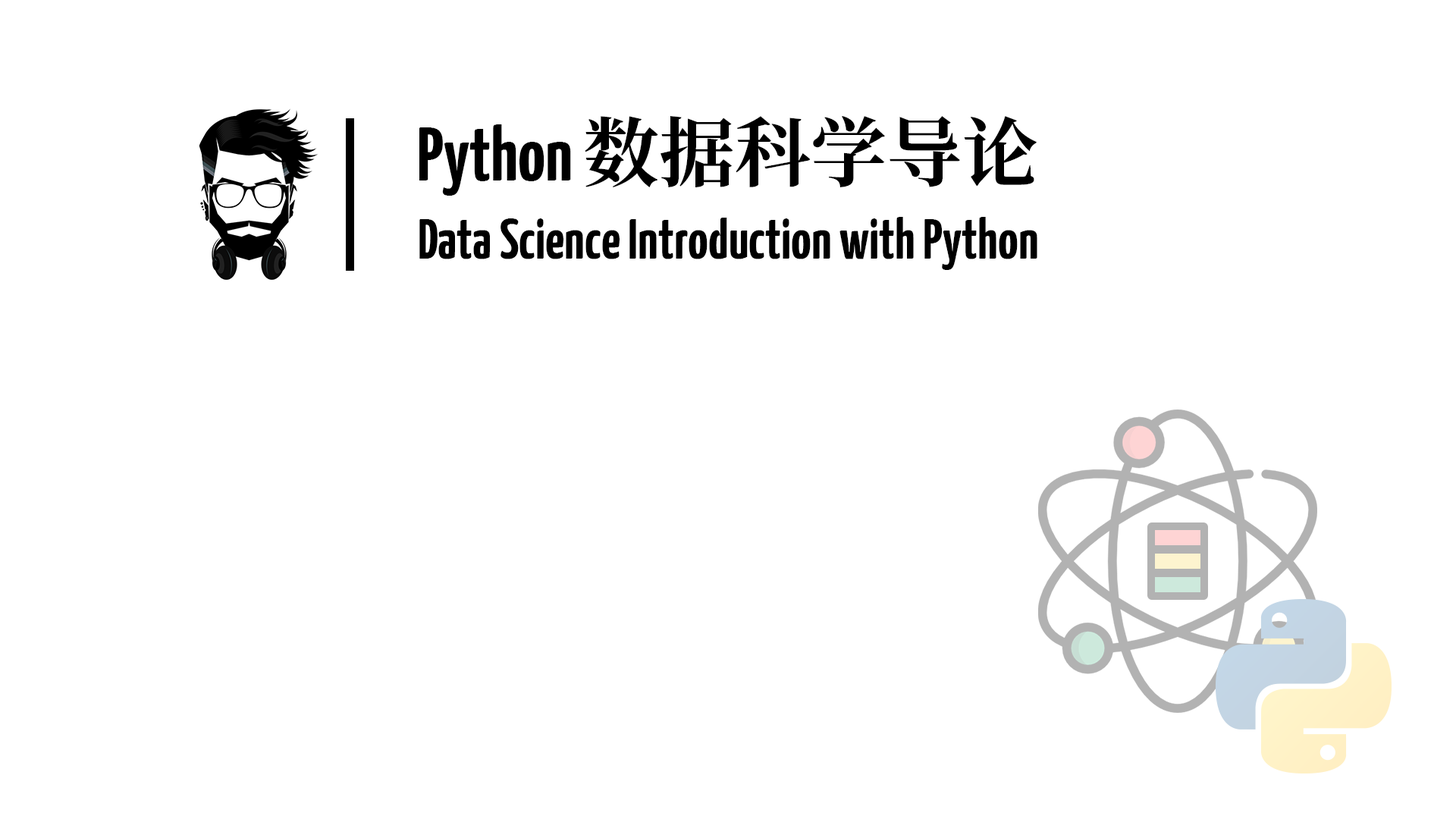
<style>
.page{position:relative;width:1456px;height:819px;background:#ffffff}
.page>*{position:absolute;margin:0}
.t1{font:75.8px "YanoneKaffeesatz-Bold";color:#000000}
.t2{font:75.8px "SourceHanSerifCN-Bold";color:#000000}
.t3{font:56.1px "YanoneKaffeesatz-Bold";color:#000000}
</style>
<div class="page">
<p class="t1" style="left:419px;top:116px;width:618px;height:80px">Python <span class="t2">数据科学导论</span></p>
<p class="t3" style="left:419px;top:217px;width:618px;height:53px">Data Science Introduction with Python</p>
</div>
